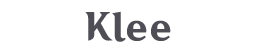
<style>
.page{position:relative;width:256px;height:56px;background:#ffffff}
.page>*{position:absolute;margin:0}
.t1{font:36px "HYWenHei-HEW";color:#4f4e57}
</style>
<div class="page">
<p class="t1" style="left:85px;top:11px;width:86px;height:31px">Klee</p>
</div>
